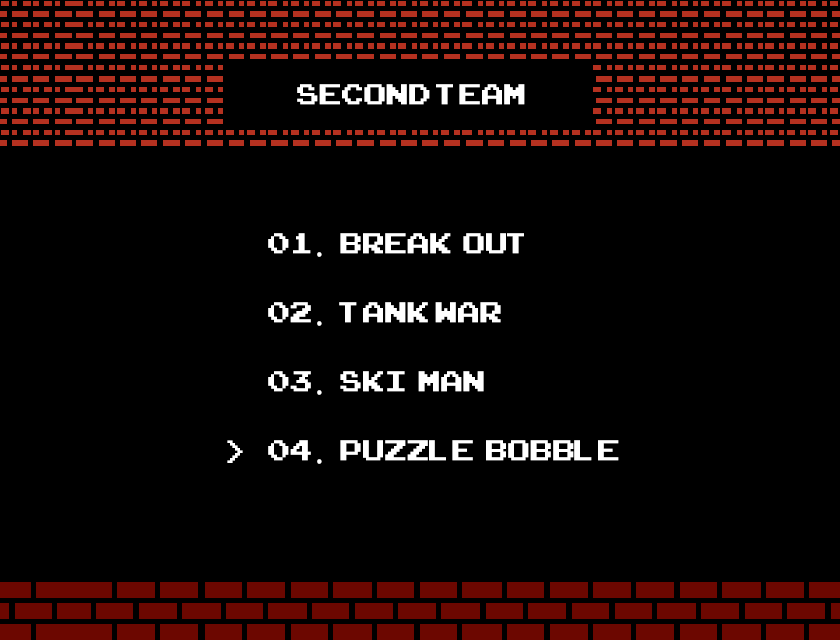
<style>
.page{position:relative;width:840px;height:640px;background:#000000}
.page>*{position:absolute;margin:0}
.t1{font:40px "ArcadeClassic";letter-spacing:0.01em;color:#ffffff}
.t2{font:40px "Gulim";letter-spacing:0.01em;color:#ffffff}
.t3{font:40px "NeoDunggeunmoCode-Regular";letter-spacing:0.01em;color:#ffffff}
</style>
<div class="page">
<p class="t1" style="left:297px;top:84px;width:228px;height:21px">Second TEAM</p>
<p class="t1" style="left:268px;top:233px;width:256px;height:24px">01<span class="t2">. </span>break  out</p>
<p class="t1" style="left:268px;top:302px;width:233px;height:24px">02<span class="t2">. </span>tank war</p>
<p class="t1" style="left:268px;top:371px;width:216px;height:24px">03<span class="t2">. </span>Ski  man</p>
<p class="t3" style="left:227px;top:440px;width:16px;height:23px">&gt;</p>
<p class="t1" style="left:268px;top:440px;width:351px;height:24px">04<span class="t2">. </span>puzzle  bobble</p>
</div>
